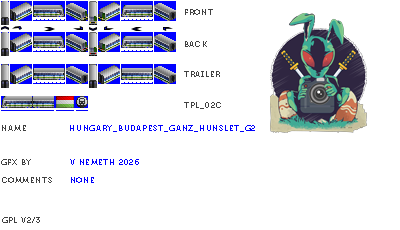
<style>
.page{position:relative;width:400px;height:230px;background:#ffffff}
.page>*{position:absolute;margin:0}
.t1{font:8px "Museo700-Regular";letter-spacing:0.075em;color:#404040;text-transform:uppercase}
.t2{font:8px "Museo700-Regular";letter-spacing:0.075em;color:#0000ff;text-transform:uppercase}
</style>
<div class="page">
<p class="t1" style="left:185px;top:9px;width:28px;height:6px">front</p>
<p class="t1" style="left:185px;top:41px;width:22px;height:6px">back</p>
<p class="t1" style="left:184px;top:71px;width:36px;height:6px">trailer</p>
<p class="t1" style="left:184px;top:102px;width:37px;height:7px">tpl_02c</p>
<p class="t1" style="left:2px;top:125px;width:24px;height:6px">name</p>
<p class="t2" style="left:70px;top:125px;width:185px;height:7px">Hungary_Budapest_Ganz_Hunslet_G2</p>
<p class="t1" style="left:1px;top:159px;width:30px;height:6px">gfx by</p>
<p class="t2" style="left:70px;top:159px;width:69px;height:6px">v nemeth 2026</p>
<p class="t1" style="left:2px;top:177px;width:50px;height:6px">comments</p>
<p class="t2" style="left:71px;top:177px;width:23px;height:6px">none</p>
<p class="t1" style="left:2px;top:217px;width:38px;height:6px">gpl v2/3</p>
</div>
